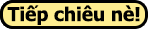
<style>
.page{position:relative;width:148px;height:30px;background:#ffee90}
.page>*{position:absolute;margin:0}
.t1{font:19px "Tahoma-Bold";color:#000000}
</style>
<div class="page">
<p class="t1" style="left:7px;top:5px;width:133px;height:20px">Tiếp chiêu nè!</p>
</div>
